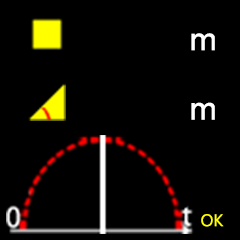
<style>
.page{position:relative;width:240px;height:240px;background:#000000}
.page>*{position:absolute;margin:0}
.t1{font:37.5px "MS-PGothic";color:#ffffff}
.t2{font:16.8px "MicrosoftNewTaiLue";color:#ffff00}
</style>
<div class="page">
<p class="t1" style="left:191px;top:33px;width:24px;height:18px">m</p>
<p class="t1" style="left:191px;top:102px;width:24px;height:18px">m</p>
<p class="t2" style="left:201px;top:214px;width:23px;height:13px">OK</p>
</div>
